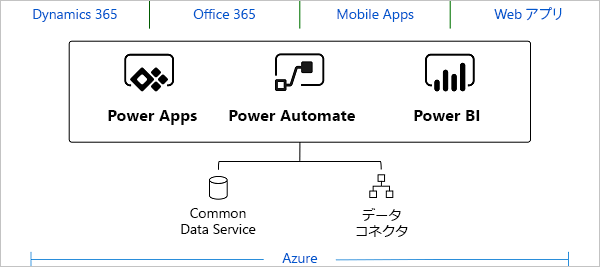
<style>
.page{position:relative;width:600px;height:267px;background:#ffffff}
.page>*{position:absolute;margin:0}
.t1{font:13.9px "SegoeUI";color:#0057cd}
.t2{font:13.9px "KozGoPr6N-Regular";color:#0057cd}
.t3{font:16.1px "SegoeUI-Bold";color:#020202}
.t4{font:13.9px "SegoeUI";color:#020202}
.t5{font:13.3px "Meiryo";letter-spacing:-0.01em;color:#020202}
</style>
<div class="page">
<p class="t1" style="left:33px;top:9px;width:84px;height:13px">Dynamics 365</p>
<p class="t1" style="left:193px;top:9px;width:62px;height:10px">Office 365</p>
<p class="t1" style="left:337px;top:9px;width:77px;height:13px">Mobile Apps</p>
<p class="t1" style="left:494px;top:7px;width:68px;height:14px">Web <span class="t2">アプリ</span></p>
<p class="t3" style="left:108px;top:110px;width:89px;height:15px">Power Apps</p>
<p class="t3" style="left:229px;top:110px;width:126px;height:11px">Power Automate</p>
<p class="t3" style="left:414px;top:110px;width:66px;height:11px">Power BI</p>
<p class="t4" style="left:181px;top:208px;width:75px;height:26px;text-align:center">Common Data Service</p>
<p class="t5" style="left:356px;top:208px;width:52px;height:29px;text-align:center">データ <br>コネクタ</p>
<p class="t1" style="left:282px;top:253px;width:36px;height:10px">Azure</p>
</div>
